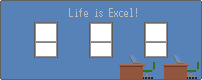
<style>
.page{position:relative;width:202px;height:80px;background:#5682b8}
.page>*{position:absolute;margin:0}
.t1{font:12px "Terminal";color:#b9b9b9}
</style>
<div class="page">
<p class="t1" style="left:69px;top:8px;width:68px;height:9px">Life is Excel!</p>
</div>
